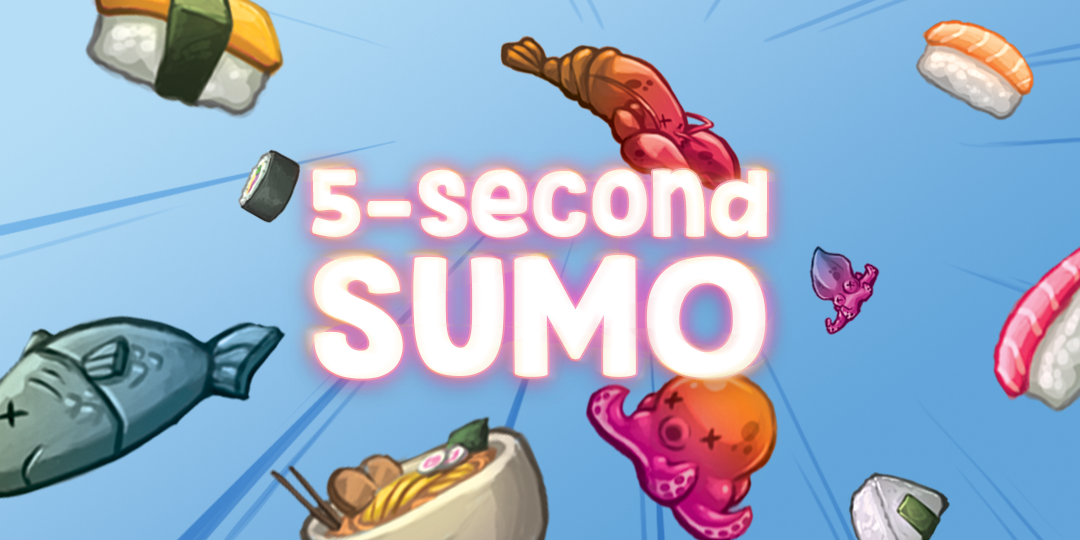
<style>
.page{position:relative;width:1080px;height:540px}
.page>*{position:absolute;margin:0}
.t1{font:85.1px/83.9px "KGInimitableOriginal";color:#ffffff;scale:1.1 1}
.t2{font:152.5px/140px "KGInimitableOriginal";color:#ffffff;scale:1.1 1}
</style>
<div class="page">
<p class="t1" style="left:312px;top:169px;width:455px;height:210px;text-align:center">5-second<br><span class="t2">SUMO</span></p>
</div>
